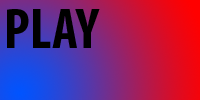
<style>
.page{position:relative;width:200px;height:100px}
.page>*{position:absolute;margin:0}
.t1{font:56.5px "MyriadPro-BoldCond";color:#000000}
</style>
<div class="page">
<p class="t1" style="left:7px;top:9px;width:93px;height:39px">PLAY</p>
</div>
